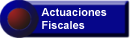
<style>
.page{position:relative;width:130px;height:38px;background:#06068a}
.page>*{position:absolute;margin:0}
.t1{font:11px "Arial-BoldMT";color:#ffffff}
</style>
<div class="page">
<p class="t1" style="left:41px;top:8px;width:66px;height:21px">Actuaciones<br>Fiscales</p>
</div>
